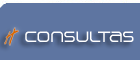
<style>
.page{position:relative;width:140px;height:60px;background:#5e75a1}
.page>*{position:absolute;margin:0}
.t1{font:18px "Birdman";color:#ffffff}
</style>
<div class="page">
<p class="t1" style="left:25px;top:31px;width:109px;height:11px">CONsULTAs</p>
</div>
